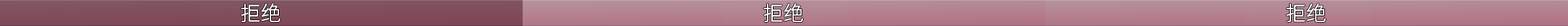
<style>
.page{position:relative;width:1568px;height:26px}
.page>*{position:absolute;margin:0}
.t1{font:20.6px "SourceHanSansSC-Normal";color:#ffffff}
</style>
<div class="page">
<p class="t1" style="left:241px;top:3px;width:39px;height:19px">拒绝</p>
<p class="t1" style="left:764px;top:3px;width:39px;height:19px">拒绝</p>
<p class="t1" style="left:1286px;top:3px;width:40px;height:19px">拒绝</p>
</div>
